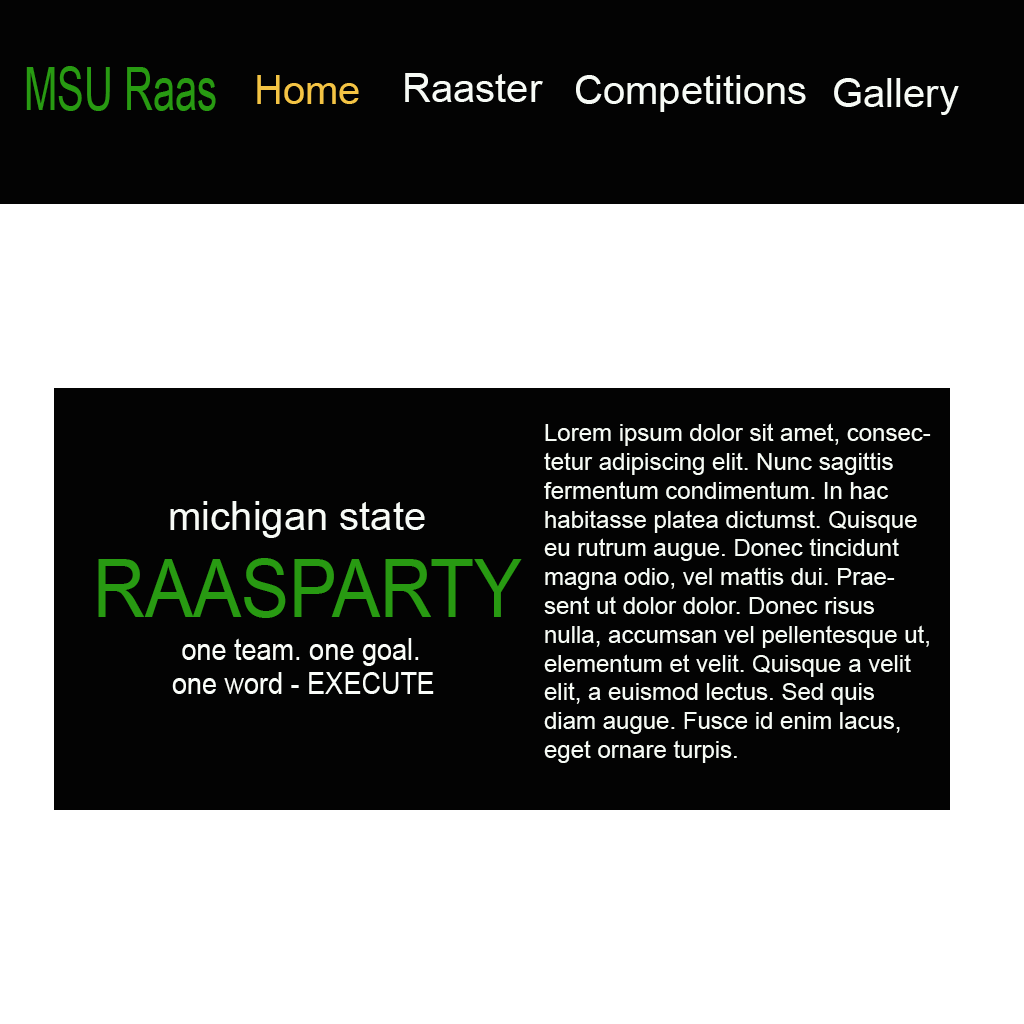
<style>
.page{position:relative;width:1024px;height:1024px;background:#030303}
.page>*{position:absolute;margin:0}
.t1{font:60.3px "ArialMT";color:#289a12;scale:0.66 1}
.t2{font:40px "ArialMT";color:#f4c444}
.t3{font:40px "ArialMT";color:#f7fbf6}
.t4{font:24px "ArialMT";color:#f6fbf5}
.t5{font:40.1px "ArialMT";color:#f7fbf6}
.t6{font:80px "ArialMT";color:#289a12;scale:0.9 1}
.t7{font:30px "ArialMT";color:#fafdf9;scale:0.9 1}
</style>
<div class="page">
<p class="t1" style="left:26px;top:66px;width:190px;height:45px">MSU Raas</p>
<p class="t2" style="left:257px;top:75px;width:102px;height:29px">Home</p>
<p class="t3" style="left:405px;top:73px;width:138px;height:29px">Raaster</p>
<p class="t3" style="left:576px;top:75px;width:230px;height:37px">Competitions</p>
<p class="t3" style="left:834px;top:78px;width:125px;height:37px">Gallery</p>
<p class="t4" style="left:544px;top:423px;width:387px;height:340px">Lorem ipsum dolor sit amet, consectetur adipiscing elit. Nunc sagittis fermentum condimentum. In hac habitasse platea dictumst. Quisque eu rutrum augue. Donec tincidunt magna odio, vel mattis dui. Praesent ut dolor dolor. Donec risus nulla, accumsan vel pellentesque ut, elementum et velit. Quisque a velit elit, a euismod lectus. Sed quis diam augue. Fusce id enim lacus, eget ornare turpis.</p>
<p class="t5" style="left:170px;top:501px;width:255px;height:37px">michigan state</p>
<p class="t6" style="left:98px;top:558px;width:424px;height:60px">RAASPARTY</p>
<p class="t7" style="left:182px;top:638px;width:237px;height:28px">one team. one goal.</p>
<p class="t7" style="left:172px;top:672px;width:262px;height:22px">one word - EXECUTE</p>
</div>
